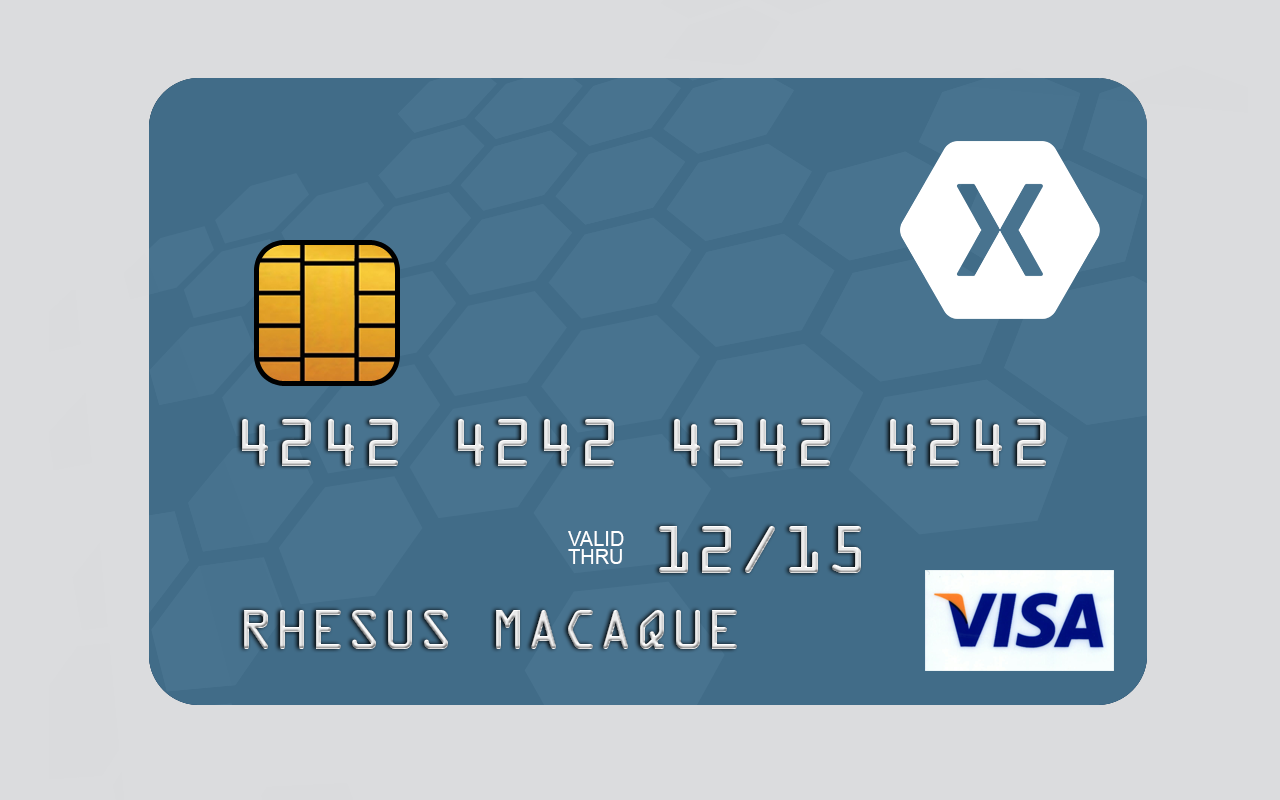
<style>
.page{position:relative;width:1280px;height:800px;background:#dbdcde}
.page>*{position:absolute;margin:0}
.t1{font:60px "OCRAStd";color:#e1e1e1}
.t2{font:20px/18px "ArialMT";color:#ffffff}
.t3{font:60px "OCRAStd"}
.t4{font:50px "OCRAStd"}
</style>
<div class="page">
<p class="t1" style="left:242px;top:419px;width:804px;height:47px">4242 4242 4242 4242</p>
<p class="t2" style="left:568px;top:531px;width:56px;height:33px">VALID<br>THRU</p>
<p class="t3" style="left:659px;top:526px;width:202px;height:47px">12/15</p>
<p class="t4" style="left:244px;top:610px;width:493px;height:39px">RHESUS MACAQUE</p>
</div>
